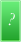
<style>
.page{position:relative;width:21px;height:42px}
.page>*{position:absolute;margin:0}
.t1{font:18px "Baskerville-Italic";color:#ffffff}
</style>
<div class="page">
<p class="t1" style="left:8px;top:13px;width:7px;height:13px">?</p>
</div>
